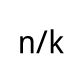
<style>
.page{position:relative;width:80px;height:80px;background:#ffffff}
.page>*{position:absolute;margin:0}
.t1{font:31.8px "DroidSans";color:#000000}
</style>
<div class="page">
<p class="t1" style="left:20px;top:29px;width:44px;height:25px">n/k</p>
</div>
